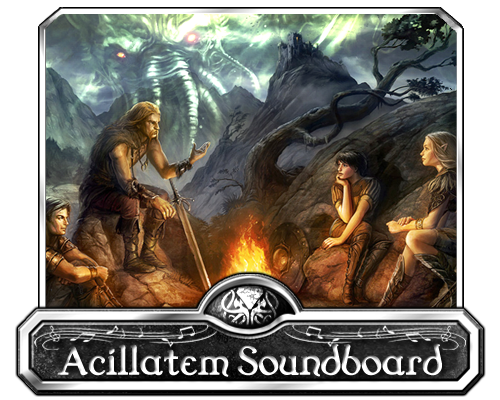
<style>
.page{position:relative;width:500px;height:400px;background:#ffffff}
.page>*{position:absolute;margin:0}
.t1{font:57.6px "Dungeon";letter-spacing:-0.01em;color:#ffffff;font-weight:bold}
</style>
<div class="page">
<p class="t1" style="left:58px;top:343px;width:384px;height:34px">Acillatem Soundboard</p>
</div>
